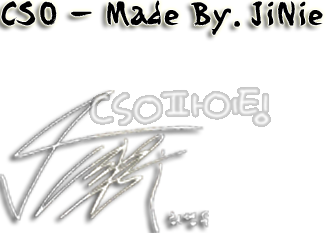
<style>
.page{position:relative;width:333px;height:233px;background:#ffffff}
.page>*{position:absolute;margin:0}
.t1{font:40px "YDIYuroB";color:#000000}
</style>
<div class="page">
<p class="t1" style="left:1px;top:0px;width:239px;height:35px">CSO - Made By.</p>
<p class="t1" style="left:251px;top:1px;width:72px;height:25px">JiNie</p>
</div>
